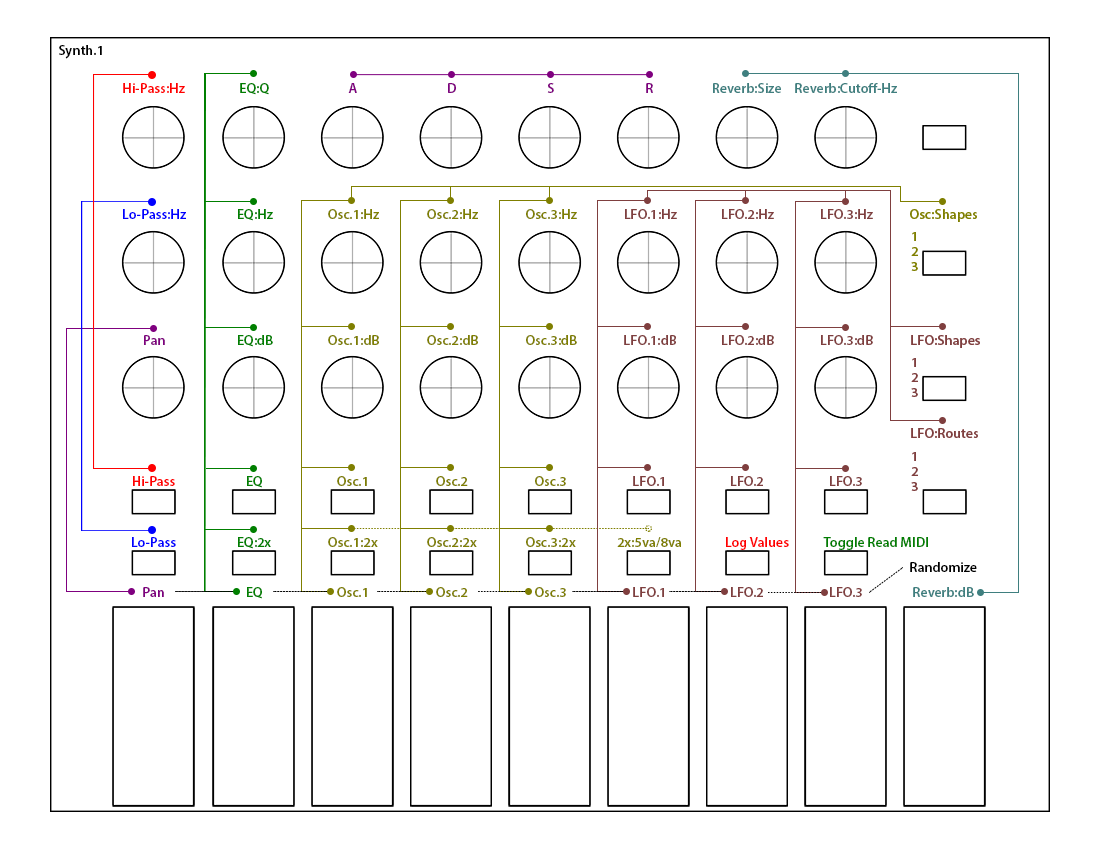
<style>
.page{position:relative;width:1100px;height:850px;background:#ffffff}
.page>*{position:absolute;margin:0}
.t1{font:13.9px "MyriadPro-Semibold";color:#000000}
.t2{font:13.9px "MyriadPro-Semibold";color:#ff0000}
.t3{font:13.9px "MyriadPro-Semibold";color:#007f00}
.t4{font:13.9px "MyriadPro-Semibold";color:#7f007f}
.t5{font:13.9px "MyriadPro-Semibold";color:#3f7f7f}
.t6{font:13.9px "MyriadPro-Semibold";color:#0000ff}
.t7{font:13.9px "MyriadPro-Semibold";color:#7f7f00}
.t8{font:13.9px "MyriadPro-Semibold";color:#7f3f3f}
</style>
<div class="page">
<p class="t1" style="left:59px;top:45px;width:43px;height:14px">Synth.1</p>
<p class="t2" style="left:123px;top:83px;width:62px;height:10px">Hi-Pass:Hz</p>
<p class="t3" style="left:240px;top:83px;width:29px;height:12px">EQ:Q</p>
<p class="t4" style="left:348px;top:83px;width:9px;height:10px">A</p>
<p class="t4" style="left:448px;top:83px;width:8px;height:10px">D</p>
<p class="t4" style="left:547px;top:83px;width:7px;height:10px">S</p>
<p class="t4" style="left:646px;top:83px;width:7px;height:10px">R</p>
<p class="t5" style="left:713px;top:83px;width:68px;height:10px">Reverb:Size</p>
<p class="t5" style="left:795px;top:83px;width:102px;height:10px">Reverb:Cutoff-Hz</p>
<p class="t6" style="left:123px;top:209px;width:63px;height:10px">Lo-Pass:Hz</p>
<p class="t3" style="left:238px;top:209px;width:35px;height:12px">EQ:Hz</p>
<p class="t7" style="left:328px;top:209px;width:51px;height:10px">Osc.1:Hz</p>
<p class="t7" style="left:427px;top:209px;width:51px;height:10px">Osc.2:Hz</p>
<p class="t7" style="left:526px;top:209px;width:51px;height:10px">Osc.3:Hz</p>
<p class="t8" style="left:625px;top:209px;width:52px;height:10px">LFO.1:Hz</p>
<p class="t8" style="left:722px;top:209px;width:52px;height:10px">LFO.2:Hz</p>
<p class="t8" style="left:821px;top:209px;width:52px;height:10px">LFO.3:Hz</p>
<p class="t7" style="left:910px;top:209px;width:67px;height:13px">Osc:Shapes</p>
<p class="t7" style="left:912px;top:232px;width:4px;height:9px">1</p>
<p class="t7" style="left:911px;top:247px;width:7px;height:9px">2</p>
<p class="t7" style="left:911px;top:262px;width:7px;height:9px">3</p>
<p class="t4" style="left:144px;top:335px;width:21px;height:10px">Pan</p>
<p class="t3" style="left:238px;top:335px;width:35px;height:12px">EQ:dB</p>
<p class="t7" style="left:328px;top:335px;width:51px;height:10px">Osc.1:dB</p>
<p class="t7" style="left:427px;top:335px;width:51px;height:10px">Osc.2:dB</p>
<p class="t7" style="left:526px;top:335px;width:51px;height:10px">Osc.3:dB</p>
<p class="t8" style="left:624px;top:335px;width:52px;height:10px">LFO.1:dB</p>
<p class="t8" style="left:722px;top:335px;width:52px;height:10px">LFO.2:dB</p>
<p class="t8" style="left:821px;top:335px;width:52px;height:10px">LFO.3:dB</p>
<p class="t8" style="left:911px;top:335px;width:69px;height:13px">LFO:Shapes</p>
<p class="t8" style="left:912px;top:358px;width:4px;height:9px">1</p>
<p class="t8" style="left:911px;top:373px;width:7px;height:9px">2</p>
<p class="t8" style="left:911px;top:388px;width:7px;height:9px">3</p>
<p class="t8" style="left:911px;top:428px;width:67px;height:10px">LFO:Routes</p>
<p class="t8" style="left:912px;top:452px;width:4px;height:9px">1</p>
<p class="t8" style="left:911px;top:467px;width:7px;height:9px">2</p>
<p class="t2" style="left:133px;top:476px;width:42px;height:10px">Hi-Pass</p>
<p class="t3" style="left:247px;top:476px;width:15px;height:12px">EQ</p>
<p class="t7" style="left:337px;top:476px;width:30px;height:10px">Osc.1</p>
<p class="t7" style="left:436px;top:476px;width:32px;height:10px">Osc.2</p>
<p class="t7" style="left:535px;top:476px;width:31px;height:10px">Osc.3</p>
<p class="t8" style="left:633px;top:476px;width:31px;height:10px">LFO.1</p>
<p class="t8" style="left:731px;top:476px;width:32px;height:10px">LFO.2</p>
<p class="t8" style="left:830px;top:476px;width:32px;height:10px">LFO.3</p>
<p class="t8" style="left:911px;top:482px;width:7px;height:9px">3</p>
<p class="t6" style="left:132px;top:537px;width:44px;height:10px">Lo-Pass</p>
<p class="t3" style="left:238px;top:537px;width:33px;height:12px">EQ:2x</p>
<p class="t7" style="left:328px;top:537px;width:50px;height:10px">Osc.1:2x</p>
<p class="t7" style="left:427px;top:537px;width:50px;height:10px">Osc.2:2x</p>
<p class="t7" style="left:526px;top:537px;width:50px;height:10px">Osc.3:2x</p>
<p class="t7" style="left:617px;top:537px;width:64px;height:10px">2x:5va/8va</p>
<p class="t2" style="left:726px;top:537px;width:63px;height:13px">Log Values</p>
<p class="t3" style="left:823px;top:537px;width:105px;height:13px">Toggle Read MIDI</p>
<p class="t1" style="left:910px;top:562px;width:67px;height:10px">Randomize</p>
<p class="t4" style="left:143px;top:587px;width:21px;height:10px">Pan</p>
<p class="t3" style="left:247px;top:587px;width:15px;height:12px">EQ</p>
<p class="t7" style="left:337px;top:587px;width:30px;height:10px">Osc.1</p>
<p class="t7" style="left:436px;top:587px;width:32px;height:10px">Osc.2</p>
<p class="t7" style="left:535px;top:587px;width:31px;height:10px">Osc.3</p>
<p class="t8" style="left:633px;top:587px;width:31px;height:10px">LFO.1</p>
<p class="t8" style="left:731px;top:587px;width:32px;height:10px">LFO.2</p>
<p class="t8" style="left:830px;top:587px;width:32px;height:10px">LFO.3</p>
<p class="t5" style="left:913px;top:587px;width:61px;height:10px">Reverb:dB</p>
</div>
